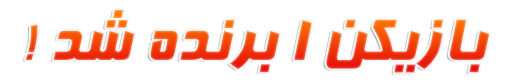
<style>
.page{position:relative;width:512px;height:83px;background:#ffffff}
.page>*{position:absolute;margin:0}
.t1{font:70px "BFarnaz"}
</style>
<div class="page">
<p class="t1" style="left:25px;top:10px;width:465px;height:63px">! بازیکن 1 برنده شد</p>
</div>
